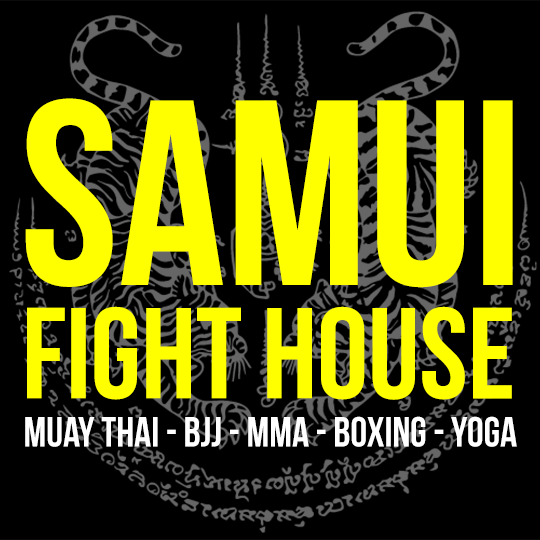
<style>
.page{position:relative;width:540px;height:540px;background:#000000}
.page>*{position:absolute;margin:0}
.t1{font:263.4px "BebasNeueBold";color:#ffff00}
.t2{font:129px "BebasNeueBold";color:#ffff00}
.t3{font:42px "BebasNeueBold";color:#ffffff}
</style>
<div class="page">
<p class="t1" style="left:25px;top:98px;width:488px;height:190px">SAMUI</p>
<p class="t2" style="left:27px;top:306px;width:485px;height:94px">fight house</p>
<p class="t3" style="left:25px;top:416px;width:492px;height:31px">muay thai - bjj - mma - boxing - yoga</p>
</div>
